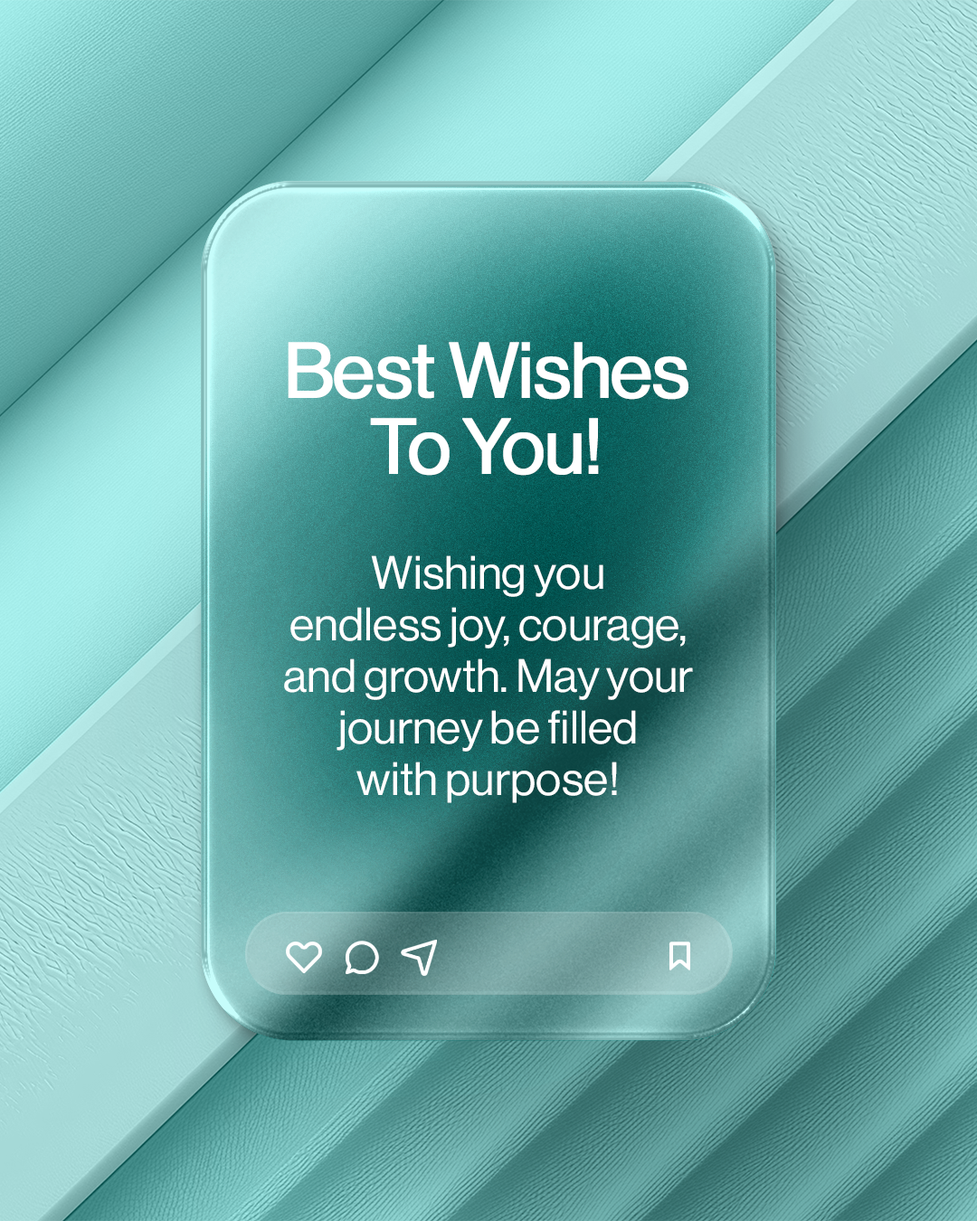
<style>
.page{position:relative;width:977px;height:1221px}
.page>*{position:absolute;margin:0}
.t1{font:76.9px/75.8px "NeueHaasDisplay-Roman";letter-spacing:-0.025em;color:#ffffff;font-weight:bold}
.t2{font:46px/51.5px "NeueHaasDisplay-Roman";color:#ffffff}
</style>
<div class="page">
<p class="t1" style="left:288px;top:342px;width:400px;height:134px;text-align:center">Best Wishes<br>To You!</p>
<p class="t2" style="left:284px;top:555px;width:409px;height:248px;text-align:center">Wishing you<br>endless joy, courage,<br>and growth. May your<br>journey be filled<br>with purpose!</p>
</div>
